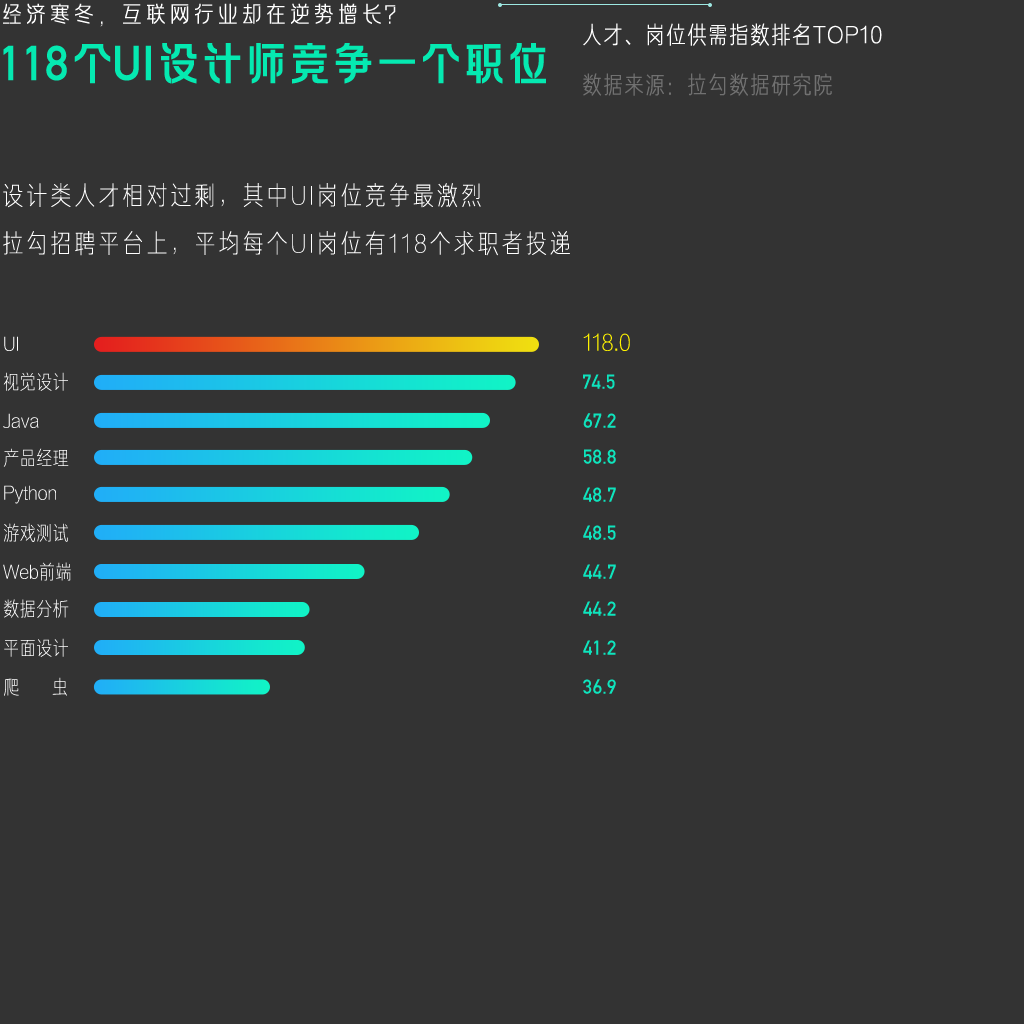
<style>
.page{position:relative;width:1024px;height:1024px;background:#333333}
.page>*{position:absolute;margin:0}
.t1{font:24px "FZLAGBTTS_XI--GB1-0";color:#ffffff;text-transform:uppercase}
.t2{font:24px "FZJUNH_XIJW--GB1-0";letter-spacing:0.05em;color:#ffffff;text-transform:uppercase}
.t3{font:48px "FZLAGBTTS_ZHONG--GB1-0";letter-spacing:-0.09em;color:#05e9b1;text-transform:uppercase}
.t4{font:48px "DINAlternate-Bold";color:#05e9b1;text-transform:uppercase}
.t5{font:24px "FZJUNH_XIJW--GB1-0";letter-spacing:0.05em;color:#717171;text-transform:uppercase}
.t6{font:26px/48px "FZJUNH_XIANJW--GB1-0";letter-spacing:0.1em;color:#ffffff}
.t7{font:20px "FZJUNH_XIJW--GB1-0";color:#ffffff}
.t8{font:24px "FZJUNH_XIJW--GB1-0";color:#fff300}
.t9{font:20px "DINAlternate-Bold";color:#0ee3bd}
.t10{font:20px "DINAlternate-Bold";color:#0ee4bd}
.t11{font:20px "DINAlternate-Bold";color:#0ee5bd}
.t12{font:20px "FZJUNH_XIJW--GB1-0"}
</style>
<div class="page">
<p class="t1" style="left:3px;top:3px;width:393px;height:24px">经济寒冬，互联网行业却在逆势增长？</p>
<p class="t2" style="left:583px;top:23px;width:299px;height:23px">人才、岗位供需指数排名TOP10</p>
<p class="t3" style="left:3px;top:43px;width:543px;height:41px"><span class="t4">118</span>个<span class="t4">UI</span>设计师竞争一个职位</p>
<p class="t5" style="left:583px;top:73px;width:249px;height:23px">数据来源：拉勾数据研究院</p>
<p class="t6" style="left:3px;top:183px;width:567px;height:73px;text-align:justify">设计类人才相对过剩，其中UI岗位竞争最激烈<br>拉勾招聘平台上，平均每个UI岗位有118个求职者投递</p>
<p class="t7" style="left:4px;top:336px;width:14px;height:15px">UI</p>
<p class="t8" style="left:583px;top:333px;width:47px;height:18px">118.0</p>
<p class="t7" style="left:3px;top:372px;width:65px;height:19px">视觉设计</p>
<p class="t9" style="left:583px;top:374px;width:32px;height:15px">74.5</p>
<p class="t7" style="left:3px;top:413px;width:36px;height:15px">Java</p>
<p class="t10" style="left:583px;top:413px;width:33px;height:15px">67.2</p>
<p class="t7" style="left:3px;top:448px;width:66px;height:19px">产品经理</p>
<p class="t11" style="left:583px;top:449px;width:33px;height:15px">58.8</p>
<p class="t7" style="left:4px;top:485px;width:52px;height:19px">Python</p>
<p class="t10" style="left:583px;top:487px;width:33px;height:15px">48.7</p>
<p class="t7" style="left:4px;top:523px;width:64px;height:19px">游戏测试</p>
<p class="t9" style="left:583px;top:525px;width:33px;height:15px">48.5</p>
<p class="t7" style="left:3px;top:562px;width:68px;height:19px">Web前端</p>
<p class="t10" style="left:583px;top:564px;width:33px;height:15px">44.7</p>
<p class="t12" style="left:3px;top:599px;width:66px;height:19px">数据分析</p>
<p class="t10" style="left:583px;top:601px;width:33px;height:15px">44.2</p>
<p class="t7" style="left:4px;top:638px;width:64px;height:19px">平面设计</p>
<p class="t10" style="left:583px;top:640px;width:33px;height:15px">41.2</p>
<p class="t12" style="left:4px;top:677px;width:63px;height:19px">爬      虫</p>
<p class="t10" style="left:583px;top:679px;width:33px;height:15px">36.9</p>
</div>
